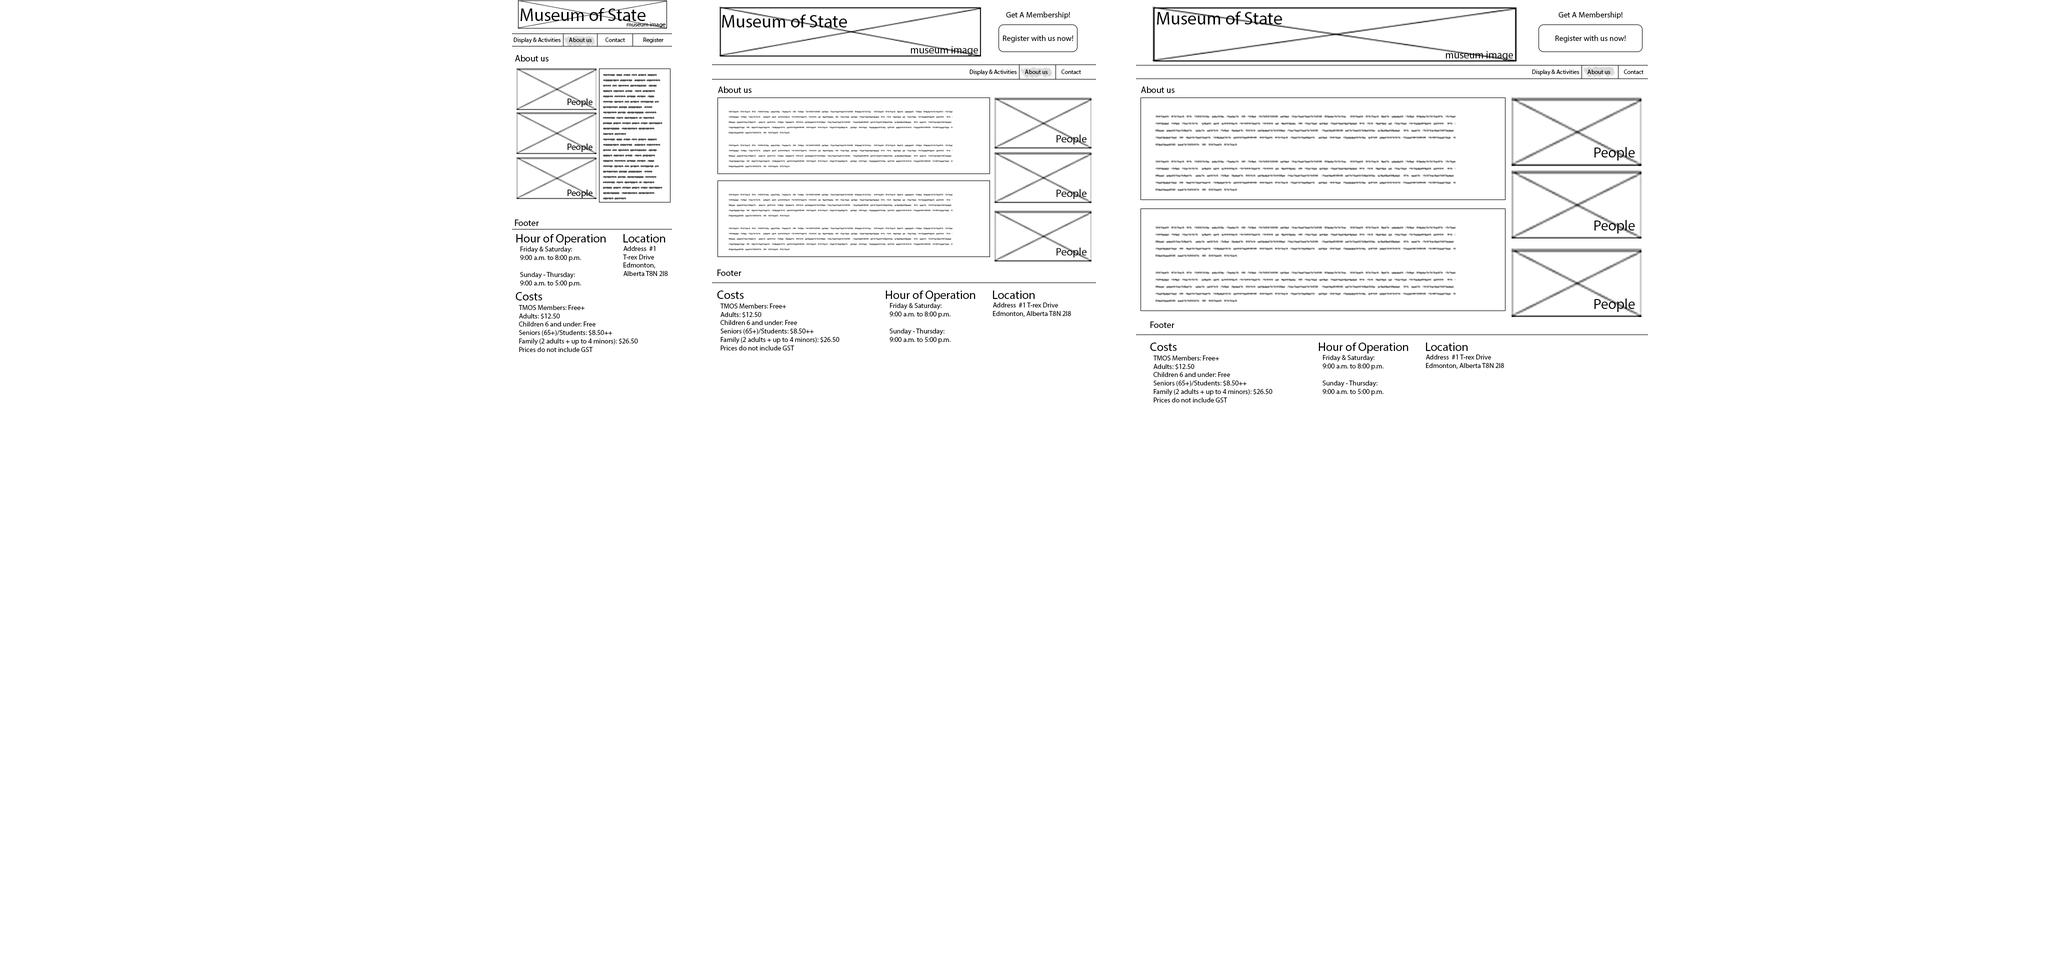
<style>
.page{position:relative;width:2048px;height:960px;background:#ffffff}
.page>*{position:absolute;margin:0}
.t1{font:18px "MyriadPro-Regular";color:#000000}
.t2{font:8px "MyriadPro-Regular";color:#000000}
.t3{font:6px "MyriadPro-Regular";color:#000000}
.t4{font:10.5px "MyriadPro-Regular";color:#000000}
.t5{font:9px "MyriadPro-Regular";color:#000000}
.t6{font:10.9px "MyriadPro-Regular";color:#000000}
.t7{font:14.6px "MyriadPro-Regular";color:#000000}
.t8{font:12px "MyriadPro-Regular";color:#000000}
.t9{font:7px "MyriadPro-Regular";color:#000000}
</style>
<div class="page">
<p class="t1" style="left:520px;top:8px;width:126px;height:13px">Museum of State</p>
<p class="t1" style="left:722px;top:14px;width:125px;height:14px">Museum of State</p>
<p class="t2" style="left:1006px;top:12px;width:64px;height:7px">Get A Membership!</p>
<p class="t1" style="left:1157px;top:12px;width:125px;height:12px">Museum of State</p>
<p class="t2" style="left:1558px;top:12px;width:64px;height:7px">Get A Membership!</p>
<p class="t3" style="left:626px;top:22px;width:40px;height:6px">museum image</p>
<p class="t3" style="left:514px;top:38px;width:47px;height:6px">Display &amp; Activities</p>
<p class="t3" style="left:569px;top:38px;width:23px;height:4px">About us</p>
<p class="t3" style="left:606px;top:38px;width:19px;height:4px">Contact</p>
<p class="t3" style="left:644px;top:38px;width:20px;height:5px">Register</p>
<p class="t2" style="left:1003px;top:35px;width:71px;height:7px">Register with us now!</p>
<p class="t2" style="left:1556px;top:35px;width:70px;height:7px">Register with us now!</p>
<p class="t4" style="left:910px;top:46px;width:68px;height:10px">museum image</p>
<p class="t4" style="left:1446px;top:51px;width:67px;height:9px">museum image</p>
<p class="t5" style="left:515px;top:55px;width:33px;height:7px">About us</p>
<p class="t3" style="left:970px;top:70px;width:47px;height:6px">Display &amp; Activities</p>
<p class="t3" style="left:1025px;top:70px;width:23px;height:4px">About us</p>
<p class="t3" style="left:1062px;top:70px;width:19px;height:4px">Contact</p>
<p class="t3" style="left:1532px;top:70px;width:48px;height:6px">Display &amp; Activities</p>
<p class="t3" style="left:1588px;top:70px;width:22px;height:4px">About us</p>
<p class="t3" style="left:1624px;top:70px;width:20px;height:4px">Contact</p>
<p class="t5" style="left:718px;top:86px;width:34px;height:7px">About us</p>
<p class="t5" style="left:1141px;top:86px;width:33px;height:7px">About us</p>
<p class="t5" style="left:568px;top:98px;width:24px;height:9px">People</p>
<p class="t6" style="left:1056px;top:134px;width:31px;height:10px">People</p>
<p class="t5" style="left:568px;top:144px;width:24px;height:8px">People</p>
<p class="t7" style="left:1594px;top:147px;width:41px;height:13px">People</p>
<p class="t5" style="left:568px;top:190px;width:24px;height:8px">People</p>
<p class="t6" style="left:1056px;top:189px;width:31px;height:10px">People</p>
<p class="t5" style="left:515px;top:220px;width:24px;height:6px">Footer</p>
<p class="t7" style="left:1594px;top:220px;width:41px;height:14px">People</p>
<p class="t8" style="left:516px;top:234px;width:90px;height:11px">Hour of Operation</p>
<p class="t9" style="left:623px;top:246px;width:45px;height:30px">Address  #1 <br>T-rex Drive<br>Edmonton, <br>Alberta T8N 2I8</p>
<p class="t8" style="left:624px;top:234px;width:42px;height:8px">Location</p>
<p class="t9" style="left:520px;top:246px;width:61px;height:41px">Friday &amp; Saturday: <br>9:00 a.m. to 8:00 p.m.<br><br>Sunday - Thursday: <br>9:00 a.m. to 5:00 p.m.</p>
<p class="t6" style="left:1056px;top:248px;width:31px;height:10px">People</p>
<p class="t5" style="left:718px;top:270px;width:24px;height:6px">Footer</p>
<p class="t8" style="left:516px;top:292px;width:26px;height:8px">Costs</p>
<p class="t8" style="left:717px;top:290px;width:27px;height:9px">Costs</p>
<p class="t8" style="left:886px;top:290px;width:90px;height:12px">Hour of Operation</p>
<p class="t8" style="left:993px;top:290px;width:42px;height:9px">Location</p>
<p class="t9" style="left:518px;top:305px;width:120px;height:47px">TMOS Members: Free+<br>Adults: $12.50<br>Children 6 and under: Free<br>Seniors (65+)/Students: $8.50++<br>Family (2 adults + up to 4 minors): $26.50<br>Prices do not include GST</p>
<p class="t9" style="left:720px;top:304px;width:120px;height:46px">TMOS Members: Free+<br>Adults: $12.50<br>Children 6 and under: Free<br>Seniors (65+)/Students: $8.50++<br>Family (2 adults + up to 4 minors): $26.50<br>Prices do not include GST</p>
<p class="t9" style="left:890px;top:303px;width:60px;height:41px">Friday &amp; Saturday: <br>9:00 a.m. to 8:00 p.m.<br><br>Sunday - Thursday: <br>9:00 a.m. to 5:00 p.m.</p>
<p class="t9" style="left:993px;top:302px;width:78px;height:15px">Address  #1 T-rex Drive<br>Edmonton, Alberta T8N 2I8</p>
<p class="t7" style="left:1594px;top:298px;width:41px;height:14px">People</p>
<p class="t5" style="left:1150px;top:322px;width:24px;height:6px">Footer</p>
<p class="t8" style="left:1150px;top:342px;width:27px;height:9px">Costs</p>
<p class="t8" style="left:1318px;top:342px;width:90px;height:12px">Hour of Operation</p>
<p class="t8" style="left:1426px;top:342px;width:42px;height:9px">Location</p>
<p class="t9" style="left:1153px;top:356px;width:119px;height:46px">TMOS Members: Free+<br>Adults: $12.50<br>Children 6 and under: Free<br>Seniors (65+)/Students: $8.50++<br>Family (2 adults + up to 4 minors): $26.50<br>Prices do not include GST</p>
<p class="t9" style="left:1322px;top:355px;width:62px;height:41px">Friday &amp; Saturday: <br>9:00 a.m. to 8:00 p.m.<br><br>Sunday - Thursday: <br>9:00 a.m. to 5:00 p.m.</p>
<p class="t9" style="left:1426px;top:354px;width:78px;height:15px">Address  #1 T-rex Drive<br>Edmonton, Alberta T8N 2I8</p>
</div>
